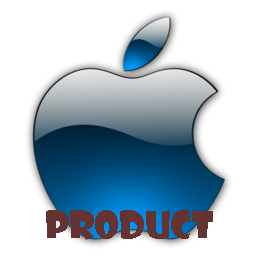
<style>
.page{position:relative;width:256px;height:256px;background:#ffffff}
.page>*{position:absolute;margin:0}
.t1{font:36px "ShowcardGothic-Reg";color:#663333}
</style>
<div class="page">
<p class="t1" style="left:46px;top:210px;width:167px;height:30px">Product</p>
</div>
